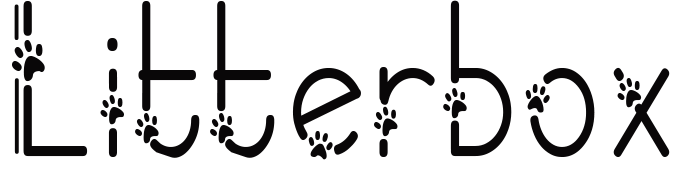
<style>
.page{position:relative;width:677px;height:178px;background:#ffffff}
.page>*{position:absolute;margin:0}
.t1{font:200px "Meows-Regular";color:#090708;scale:0.81 1}
</style>
<div class="page">
<p class="t1" style="left:12px;top:0px;width:658px;height:160px">Litterbox</p>
</div>
